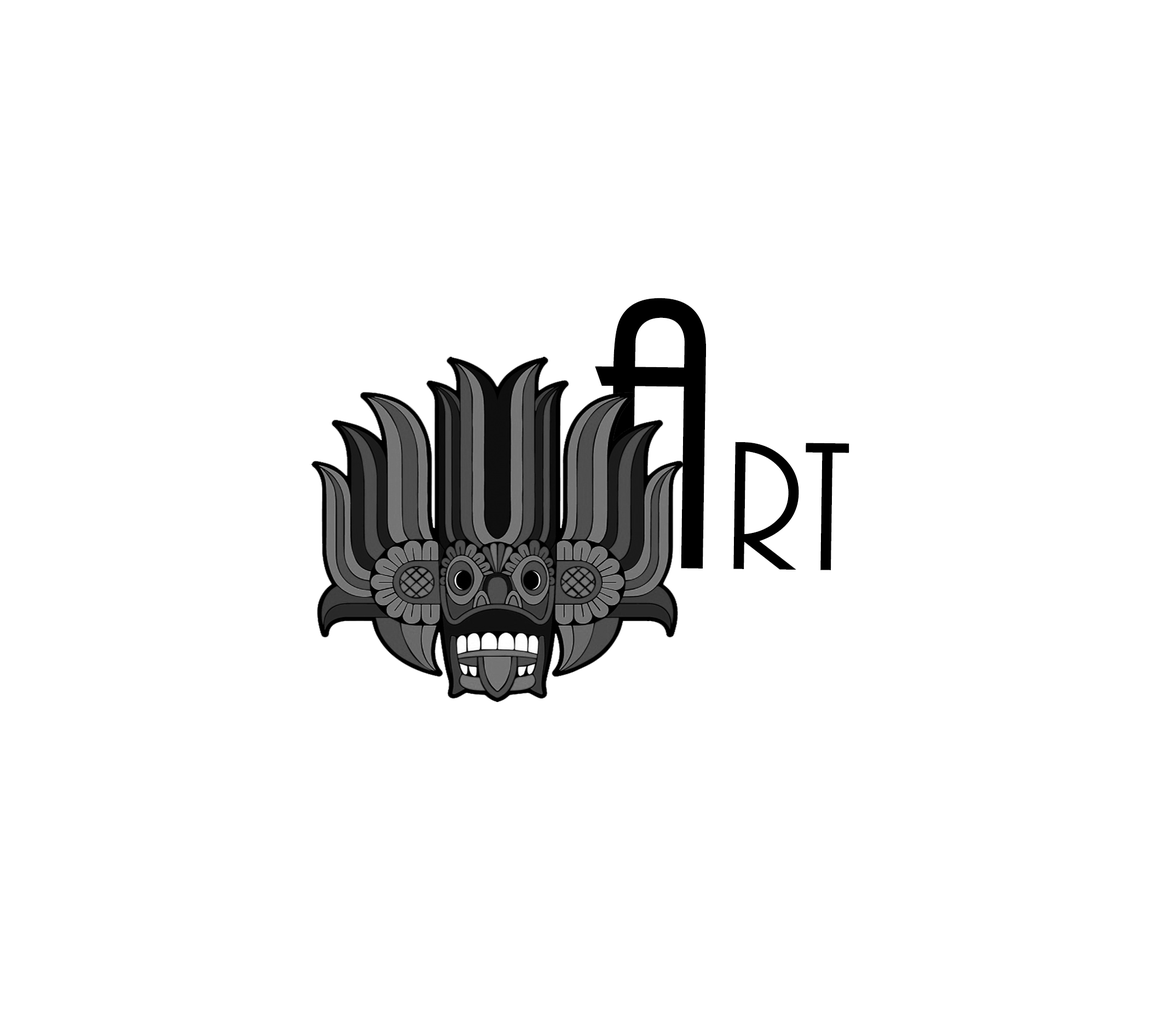
<style>
.page{position:relative;width:1163px;height:1026px;background:#ffffff}
.page>*{position:absolute;margin:0}
.t1{font:190px "ARBONNIE";color:#000000;scale:1.1 1}
.t2{font:398.9px "ARBONNIE";color:#000000;scale:1.1 1}
</style>
<div class="page">
<p class="t1" style="left:595px;top:298px;width:254px;height:272px;rotate:1deg"><span class="t2">A</span>rt</p>
</div>
